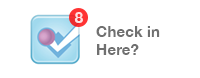
<style>
.page{position:relative;width:200px;height:78px;background:#ffffff}
.page>*{position:absolute;margin:0}
.t1{font:15.2px "HelveticaNeue-Bold";color:#ffe1e1}
.t2{font:15.3px "HelveticaNeue-Bold";color:#707070}
</style>
<div class="page">
<p class="t1" style="left:74px;top:12px;width:9px;height:11px">8</p>
<p class="t2" style="left:96px;top:26px;width:64px;height:29px">Check in<br>Here?</p>
</div>
